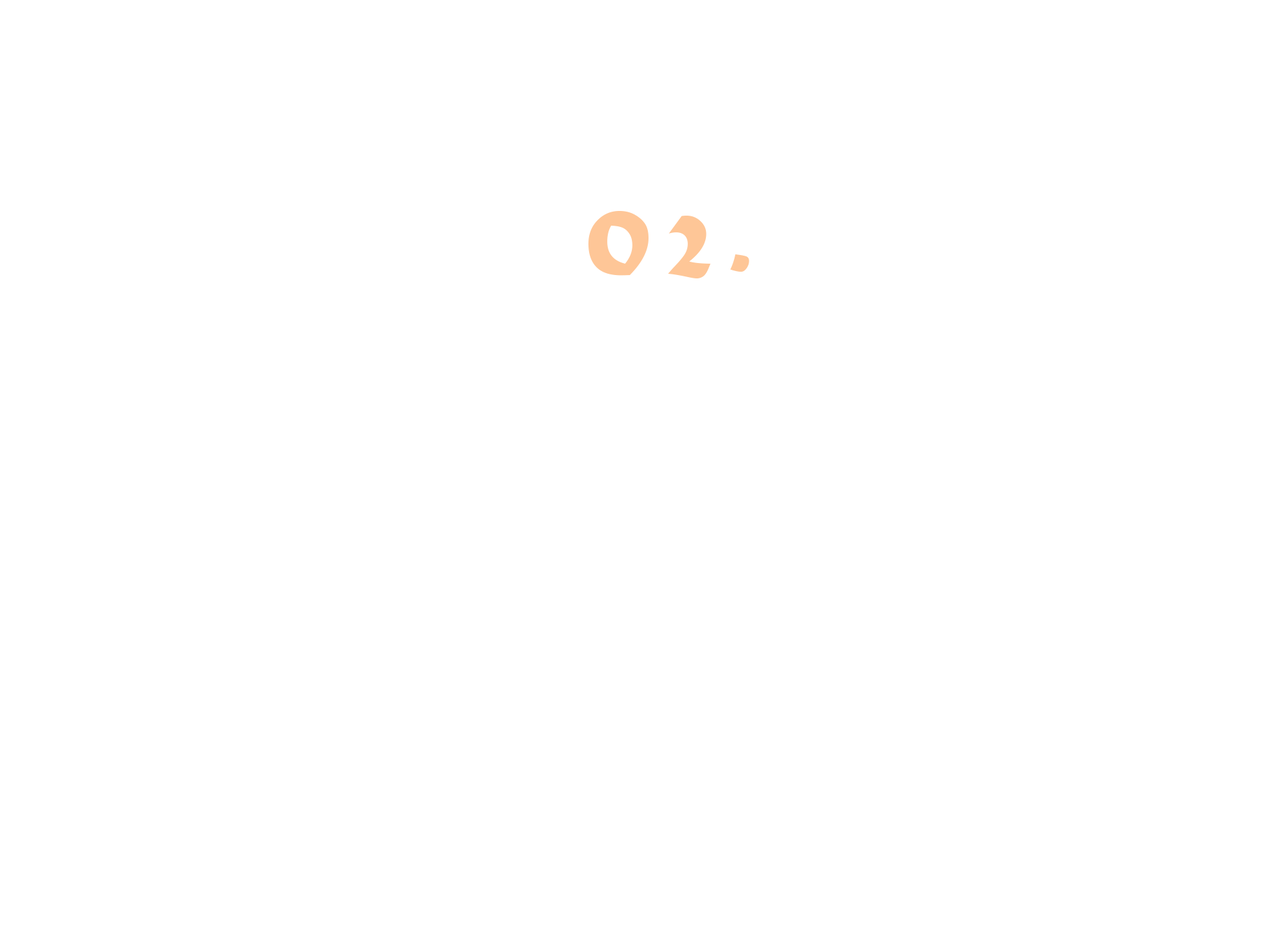
<style>
.page{position:relative;width:1261px;height:946px;background:#ffffff}
.page>*{position:absolute;margin:0}
.t1{font:100.1px "MaturaMTScriptCapitals";letter-spacing:0.15em;color:#fec697;text-transform:uppercase}
</style>
<div class="page">
<p class="t1" style="left:588px;top:211px;width:161px;height:67px">02.</p>
</div>
